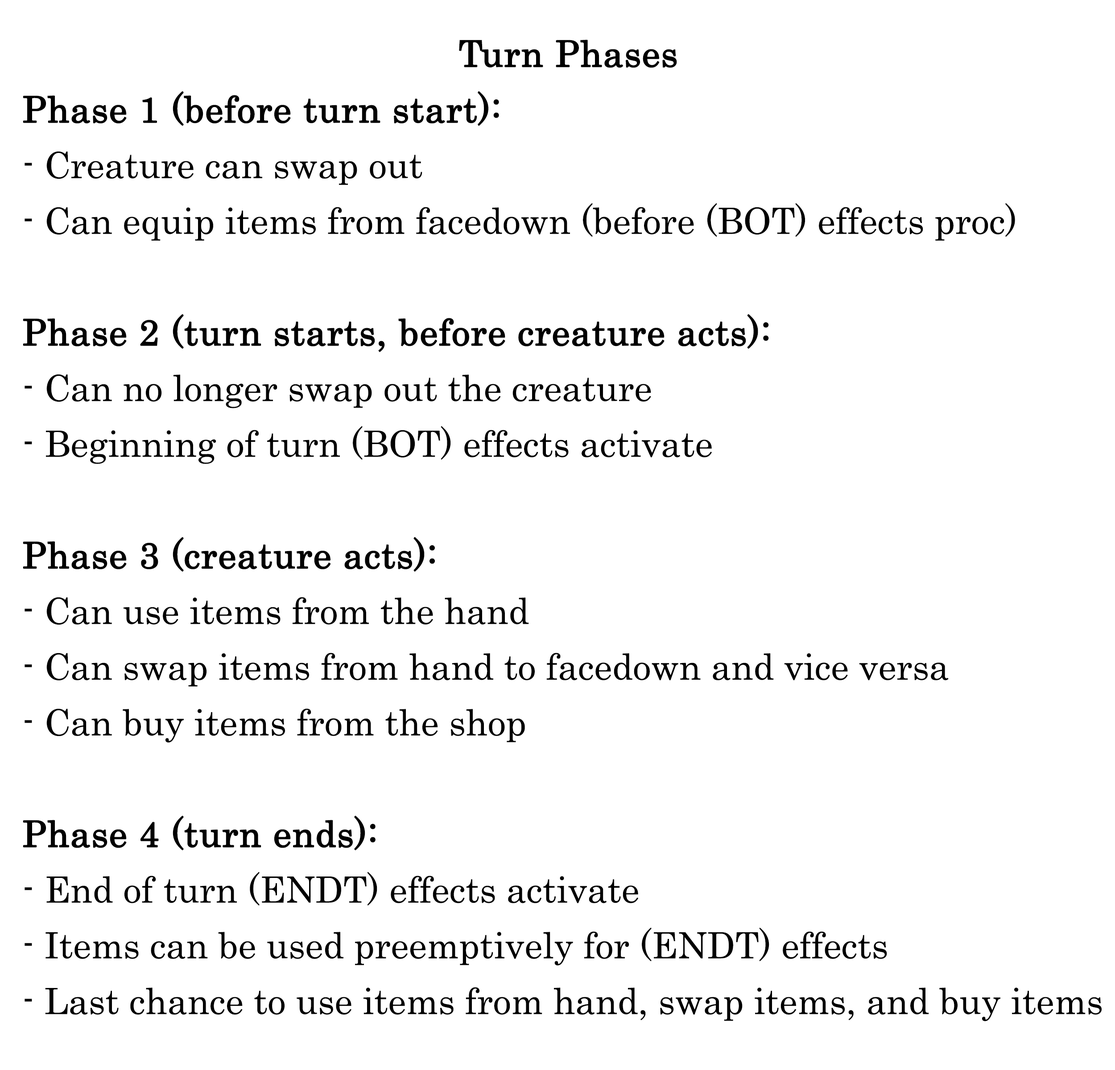
<style>
.page{position:relative;width:1115px;height:1070px;background:#ffffff}
.page>*{position:absolute;margin:0}
.t1{font:61.9px/55.7px "Century";color:#000000}
.t2{font:61.9px/55.7px "Century";color:#000000;font-weight:bold}
</style>
<div class="page">
<p class="t1" style="left:23px;top:40px;width:1078px;height:981px;text-align:center"><span class="t2">Turn Phases<br>Phase 1 (before turn start):<br></span>- Creature can swap out<br>- Can equip items from facedown (before (BOT) effects proc)<br><br><span class="t2">Phase 2 (turn starts, before creature acts):<br></span>- Can no longer swap out the creature<br>- Beginning of turn (BOT) effects activate<br><br><span class="t2">Phase 3 (creature acts):<br></span>- Can use items from the hand<br>- Can swap items from hand to facedown and vice versa<br>- Can buy items from the shop<br><br><span class="t2">Phase 4 (turn ends):<br></span>- End of turn (ENDT) effects activate<br>- Items can be used preemptively for (ENDT) effects<br>- Last chance to use items from hand, swap items, and buy items</p>
</div>
